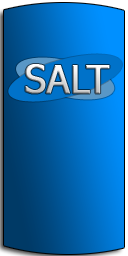
<style>
.page{position:relative;width:128px;height:256px}
.page>*{position:absolute;margin:0}
.t1{font:38px "Tahoma";font-weight:bold}
</style>
<div class="page">
<p class="t1" style="left:25px;top:64px;width:85px;height:30px">SALT</p>
</div>
